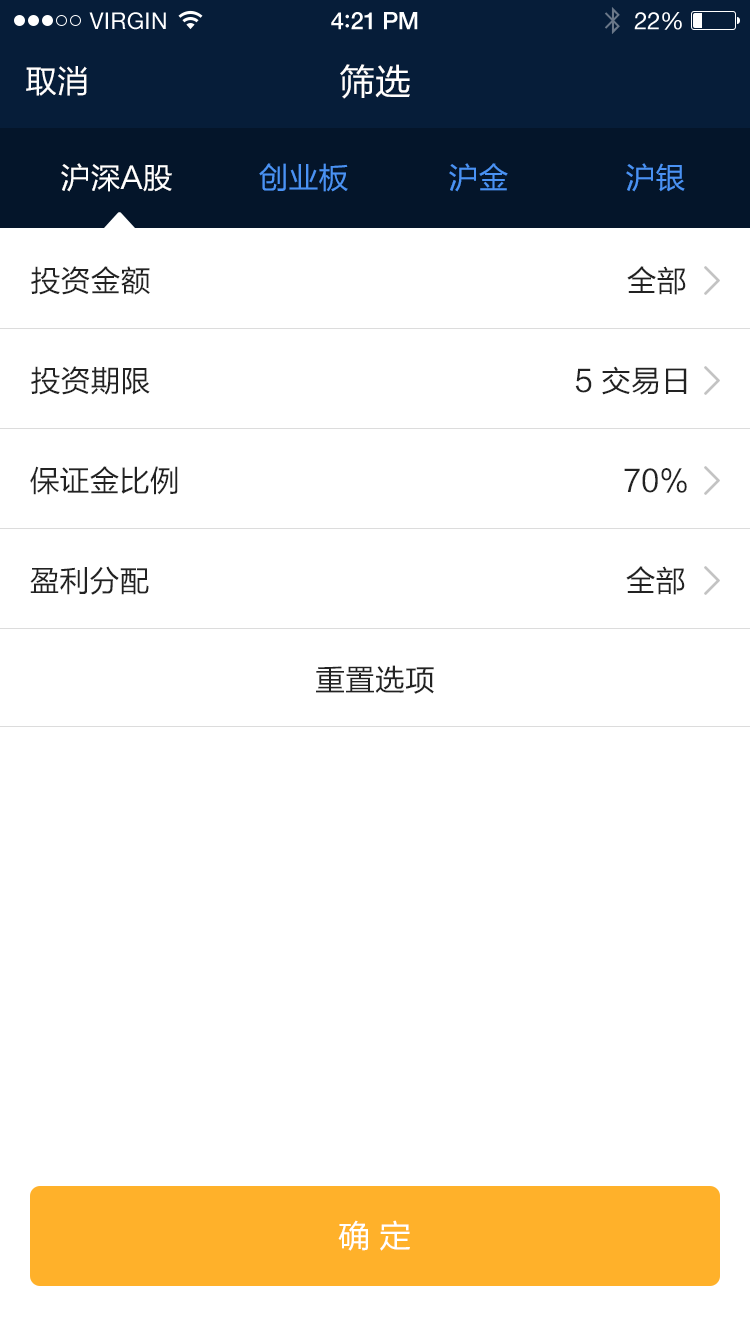
<style>
.page{position:relative;width:750px;height:1334px;background:#ffffff}
.page>*{position:absolute;margin:0}
.t1{font:36px "FZLTHK--GBK1-0";color:#ffffff}
.t2{font:32px "FZLTHK--GBK1-0";color:#ffffff}
.t3{font:30px "FZLTHK--GBK1-0";color:#ffffff}
.t4{font:30px "FZLTHK--GBK1-0";color:#4a92f4}
.t5{font:30px "FZLTHK--GBK1-0";color:#222222}
</style>
<div class="page">
<p class="t1" style="left:340px;top:64px;width:70px;height:35px">筛选</p>
<p class="t2" style="left:26px;top:66px;width:61px;height:30px">取消</p>
<p class="t3" style="left:61px;top:163px;width:111px;height:29px">沪深A股</p>
<p class="t4" style="left:259px;top:163px;width:89px;height:29px">创业板</p>
<p class="t4" style="left:449px;top:163px;width:59px;height:29px">沪金</p>
<p class="t4" style="left:626px;top:163px;width:59px;height:29px">沪银</p>
<p class="t5" style="left:31px;top:266px;width:119px;height:29px">投资金额</p>
<p class="t5" style="left:627px;top:266px;width:59px;height:29px">全部</p>
<p class="t5" style="left:31px;top:366px;width:119px;height:29px">投资期限</p>
<p class="t5" style="left:575px;top:366px;width:112px;height:29px">5 交易日</p>
<p class="t5" style="left:30px;top:466px;width:148px;height:29px">保证金比例</p>
<p class="t5" style="left:624px;top:468px;width:63px;height:25px">70%</p>
<p class="t5" style="left:30px;top:566px;width:119px;height:29px">盈利分配</p>
<p class="t5" style="left:626px;top:566px;width:59px;height:29px">全部</p>
<p class="t5" style="left:316px;top:665px;width:118px;height:29px">重置选项</p>
<p class="t2" style="left:338px;top:1220px;width:72px;height:31px">确 定</p>
</div>
